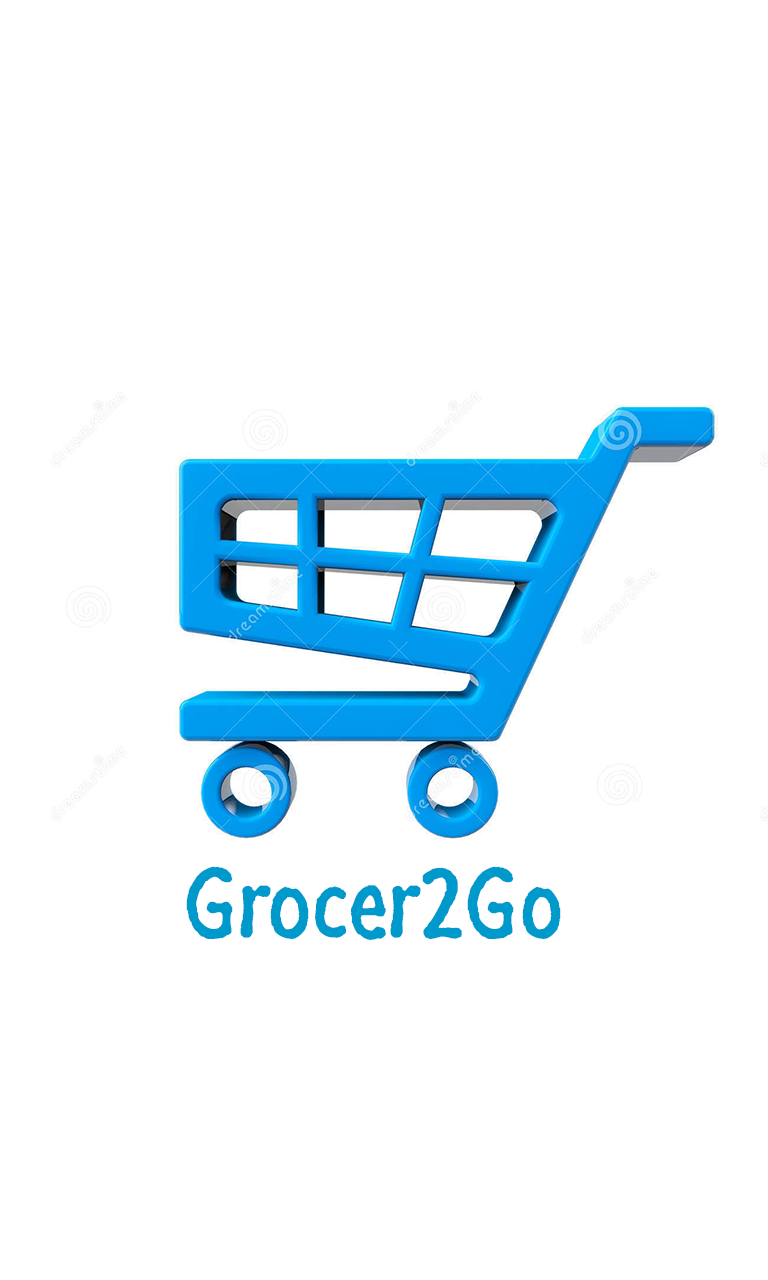
<style>
.page{position:relative;width:768px;height:1280px;background:#ffffff}
.page>*{position:absolute;margin:0}
.t1{font:100px "SegoeMarker";color:#0099cc}
</style>
<div class="page">
<p class="t1" style="left:186px;top:866px;width:375px;height:74px">Grocer2Go</p>
</div>
